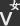
<style>
.page{position:relative;width:20px;height:26px;background:#333333}
.page>*{position:absolute;margin:0}
.t1{font:12px "DFKaiShu-SB-Estd-BF";color:#ececec;font-weight:bold}
.t2{font:18px "ArialMT";color:#ececec;font-weight:bold}
</style>
<div class="page">
<p class="t1" style="left:9px;top:0px;width:12px;height:11px">女</p>
<p class="t2" style="left:0px;top:12px;width:13px;height:14px">V</p>
</div>
